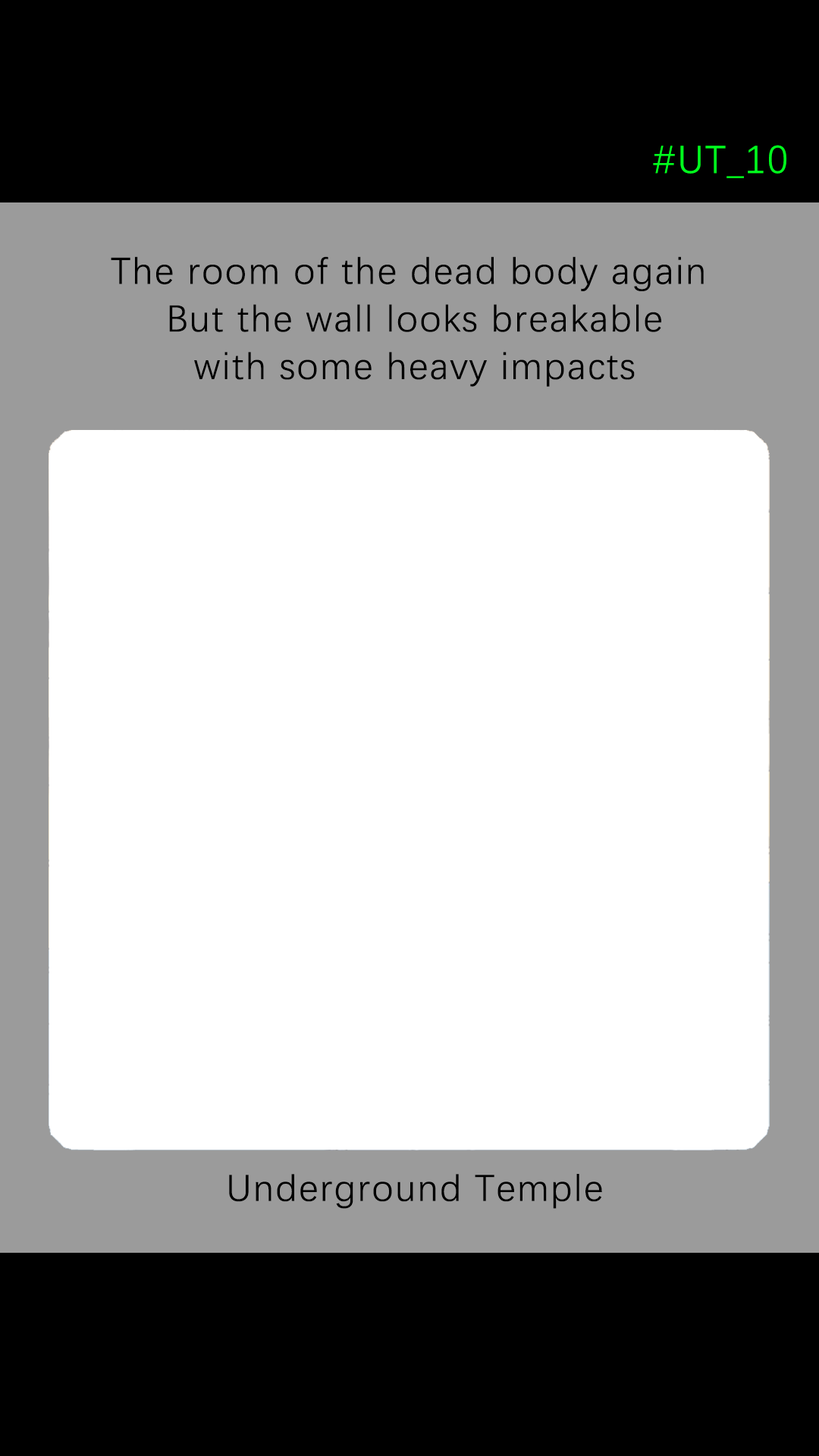
<style>
.page{position:relative;width:819px;height:1456px;background:#ffffff}
.page>*{position:absolute;margin:0}
.t1{font:39.2px "DengXian-Regular";letter-spacing:0.04em;color:#00ff1e}
.t2{font:37.9px/47.6px "DengXian-Regular";letter-spacing:0.04em;color:#000000}
.t3{font:37.9px "DengXian-Regular";letter-spacing:0.04em;color:#000000}
</style>
<div class="page">
<p class="t1" style="left:653px;top:145px;width:133px;height:33px">#UT_10</p>
<p class="t2" style="left:111px;top:256px;width:593px;height:131px;text-align:center">The room of the dead body again <br>But the wall looks breakable<br>with some heavy impacts</p>
<p class="t3" style="left:229px;top:1174px;width:373px;height:35px">Underground Temple</p>
</div>
